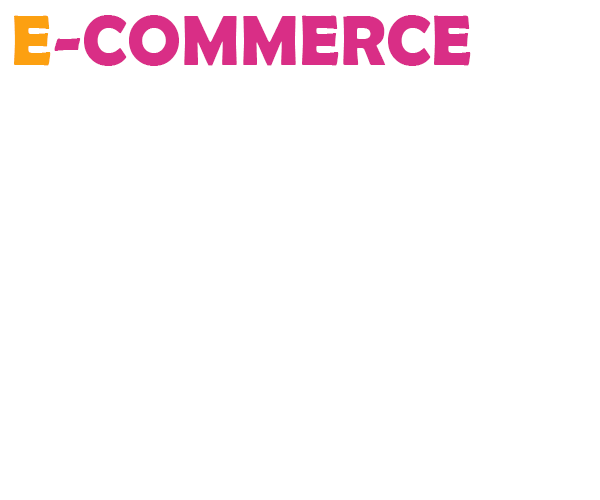
<style>
.page{position:relative;width:600px;height:500px;background:#ffffff}
.page>*{position:absolute;margin:0}
.t1{font:72px "BerlinSansFBDemi-Bold";color:#d92e86;font-variant:small-caps}
.t2{font:72px "BerlinSansFBDemi-Bold";color:#fca011;font-variant:small-caps}
</style>
<div class="page">
<p class="t1" style="left:14px;top:15px;width:457px;height:51px"><span class="t2">E</span>-COMMERCE</p>
</div>
